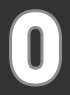
<style>
.page{position:relative;width:70px;height:95px;background:#333333}
.page>*{position:absolute;margin:0}
.t1{font:110px "Bauhaus93";letter-spacing:0.2em;color:#ffffff}
</style>
<div class="page">
<p class="t1" style="left:9px;top:9px;width:53px;height:78px">0</p>
</div>
